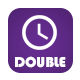
<style>
.page{position:relative;width:80px;height:80px;background:#ffffff}
.page>*{position:absolute;margin:0}
.t1{font:15px "Bauhaus93";color:#ffffff}
</style>
<div class="page">
<p class="t1" style="left:15px;top:56px;width:51px;height:12px">DOUBLE</p>
</div>
